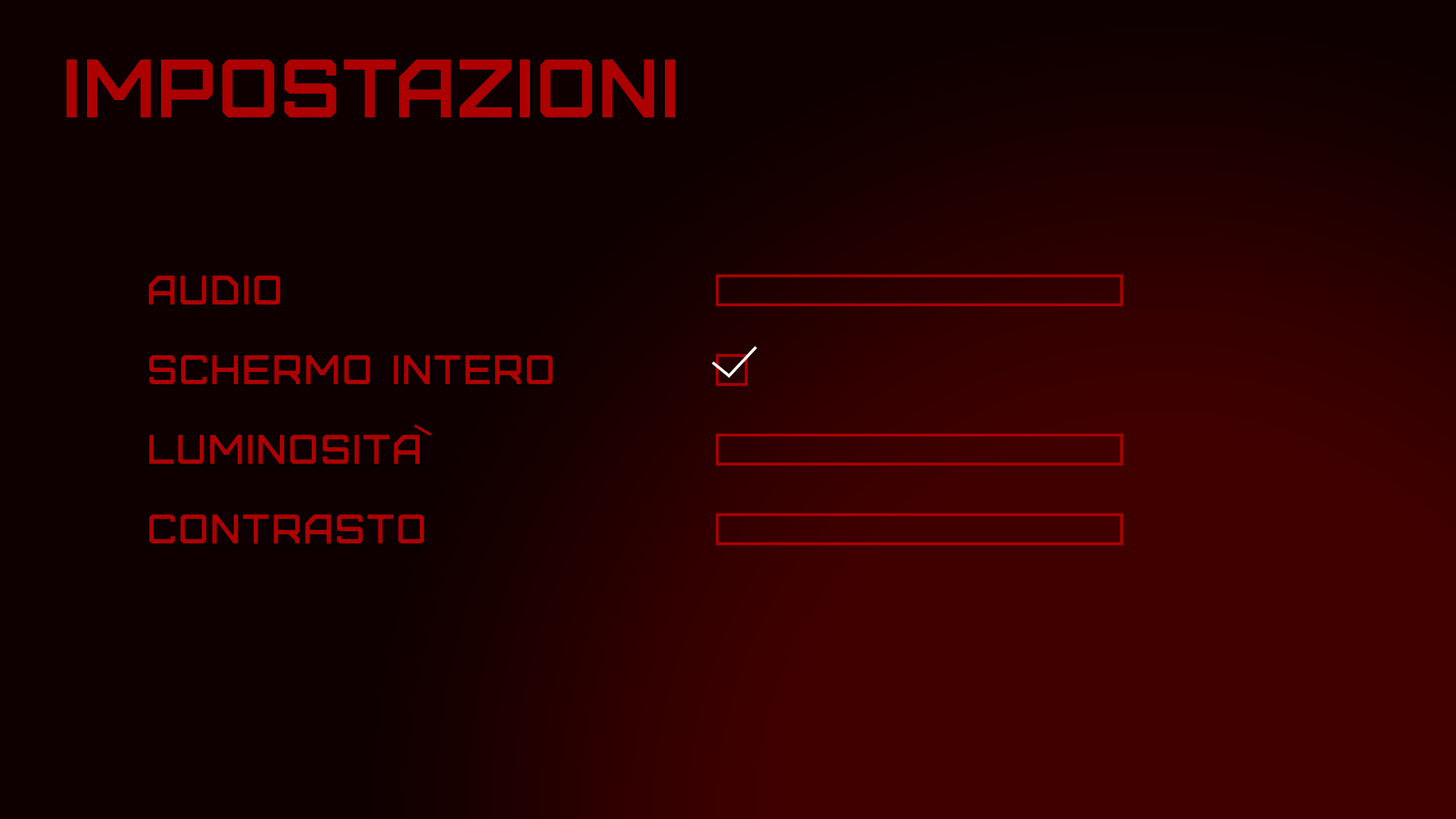
<style>
.page{position:relative;width:1456px;height:819px;background:#0e0000}
.page>*{position:absolute;margin:0}
.t1{font:85.3px "Furore";color:#ad0000}
.t2{font:43.8px "Furore"}
</style>
<div class="page">
<p class="t1" style="left:64px;top:57px;width:613px;height:62px">IMPOSTAZIONI</p>
<p class="t2" style="left:147px;top:274px;width:136px;height:33px">Audio</p>
<p class="t2" style="left:147px;top:353px;width:408px;height:33px">Schermo Intero</p>
<p class="t2" style="left:147px;top:433px;width:275px;height:33px">LuminositA</p>
<p class="t2" style="left:147px;top:512px;width:280px;height:33px">Contrasto</p>
</div>
